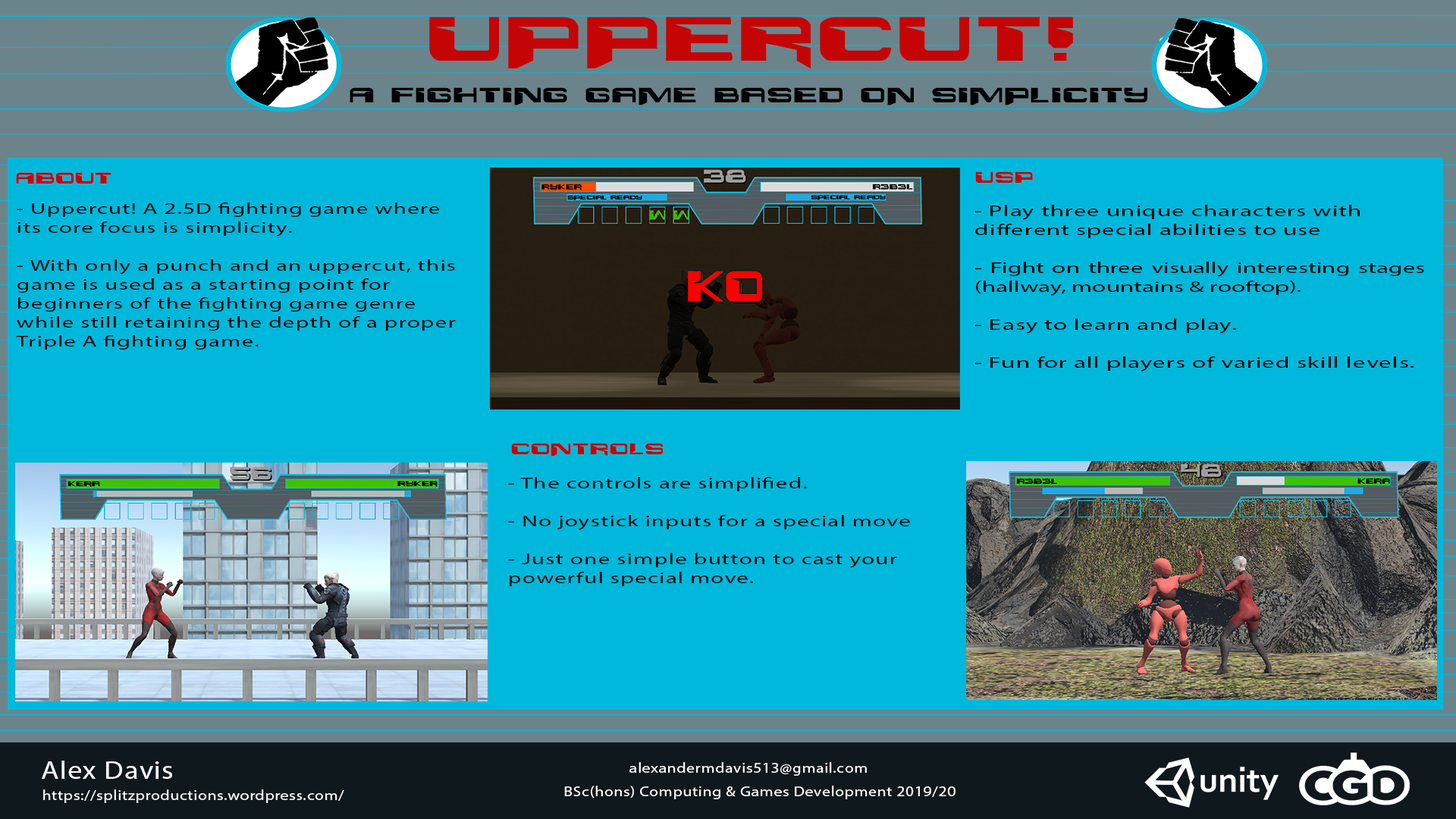
<style>
.page{position:relative;width:1456px;height:819px;background:#00b8db}
.page>*{position:absolute;margin:0}
.t1{font:69.8px "Interdiction";letter-spacing:0.03em;color:#c50505;scale:1.15 1}
.t2{font:23.3px "Interdiction";letter-spacing:0.03em;color:#000000;scale:1.15 1}
.t3{font:17.4px "Interdiction";letter-spacing:0.03em;color:#c50505;scale:1.15 1}
.t4{font:15.8px "MyriadPro-Regular";letter-spacing:0.03em;color:#000000;scale:1.52 1}
.t5{font:15.8px "MyriadPro-Regular";color:#000000;scale:1.59 1}
.t6{font:15.8px "MyriadPro-Regular";letter-spacing:0.03em;color:#000000;scale:1.59 1}
.t7{font:25.3px "MyriadPro-Regular";letter-spacing:0.03em;color:#ffffff;scale:1.15 1}
.t8{font:14.2px "MyriadPro-Regular";letter-spacing:0.03em;color:#ffffff;scale:1.15 1}
</style>
<div class="page">
<p class="t1" style="left:429px;top:17px;width:644px;height:52px">Uppercut!</p>
<p class="t2" style="left:350px;top:87px;width:797px;height:18px">A Fighting Game based on simplicity</p>
<p class="t3" style="left:16px;top:172px;width:95px;height:12px">About</p>
<p class="t3" style="left:975px;top:171px;width:58px;height:12px">USP</p>
<p class="t4" style="left:16px;top:202px;width:440px;height:148px">- Uppercut! A 2.5D fighting game where its core focus is simplicity. <br><br>- With only a punch and an uppercut, this game is used as a starting point for beginners of the fighting game genre while still retaining the depth of a proper Triple A fighting game.</p>
<p class="t5" style="left:975px;top:205px;width:449px;height:167px"><span class="t6">- Play three unique characters with different special abilities to use<br><br></span>- Fight on three visually interesting stages (hallway, mountains &amp; rooftop).<br><span class="t6"><br>- Easy to learn and play.<br><br>- Fun for all players of varied skill levels.</span></p>
<p class="t3" style="left:511px;top:443px;width:153px;height:14px">Controls</p>
<p class="t4" style="left:508px;top:477px;width:402px;height:109px">- The controls are simplified. <br><br>- No joystick inputs for a special move<br><br>- Just one simple button to cast your <br>powerful special move.</p>
<p class="t7" style="left:42px;top:761px;width:130px;height:18px">Alex Davis</p>
<p class="t8" style="left:629px;top:762px;width:238px;height:14px">alexandermdavis513@gmail.com</p>
<p class="t8" style="left:564px;top:786px;width:391px;height:13px">BSc(hons) Computing &amp; Games Development 2019/20</p>
<p class="t8" style="left:43px;top:789px;width:301px;height:14px">https://splitzproductions.wordpress.com/</p>
</div>
